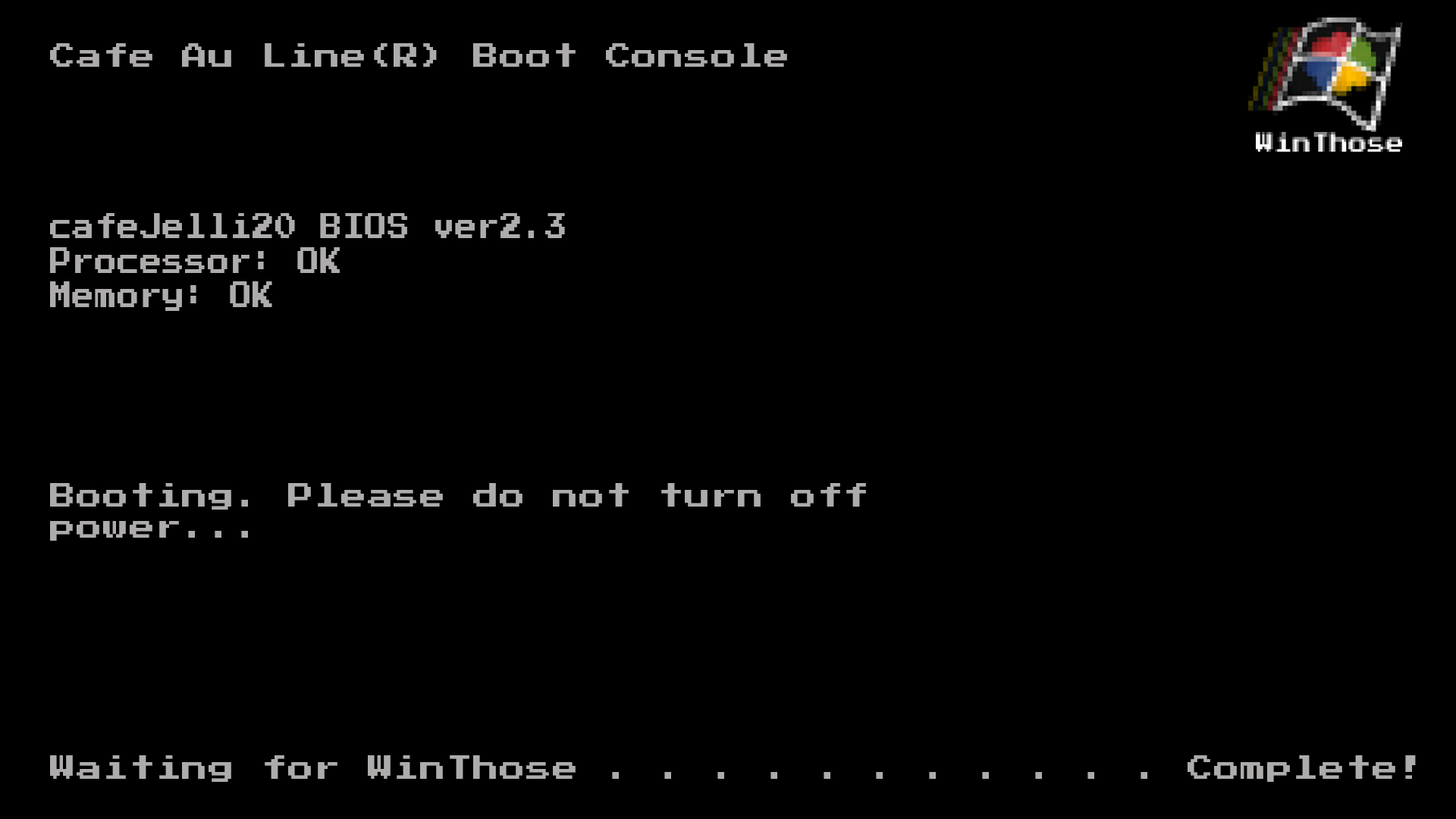
<style>
.page{position:relative;width:1456px;height:819px;background:#000000}
.page>*{position:absolute;margin:0}
.t1{font:26.3px "PressStart2P-Regular";letter-spacing:0.025em;color:#aeabab}
.t2{font:28.9px "PressStart2P-Regular";letter-spacing:0.025em;color:#aeabab;scale:0.76 1}
</style>
<div class="page">
<p class="t1" style="left:50px;top:43px;width:737px;height:24px">Cafe Au Line(R) Boot Console</p>
<p class="t2" style="left:50px;top:213px;width:515px;height:98px">cafeJelli20 BIOS ver2.3<br>Processor: OK<br>Memory: OK</p>
<p class="t1" style="left:50px;top:483px;width:816px;height:58px">Booting. Please do not turn off power...</p>
<p class="t1" style="left:50px;top:755px;width:1366px;height:27px">Waiting for WinThose . . . . . . . . . . . Complete!</p>
</div>
